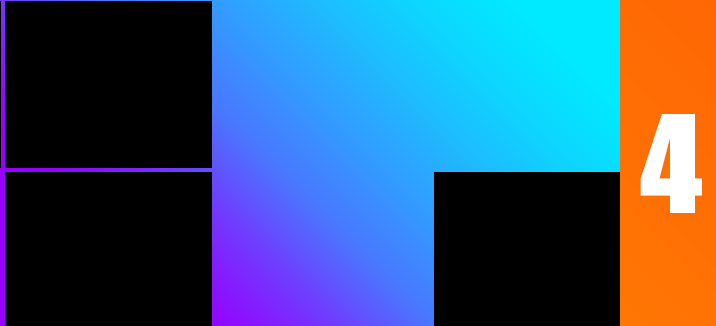
<style>
.page{position:relative;width:716px;height:326px;background:#000000}
.page>*{position:absolute;margin:0}
.t1{font:125px "Impact";color:#ffffff}
</style>
<div class="page">
<p class="t1" style="left:640px;top:114px;width:62px;height:99px">4</p>
</div>
